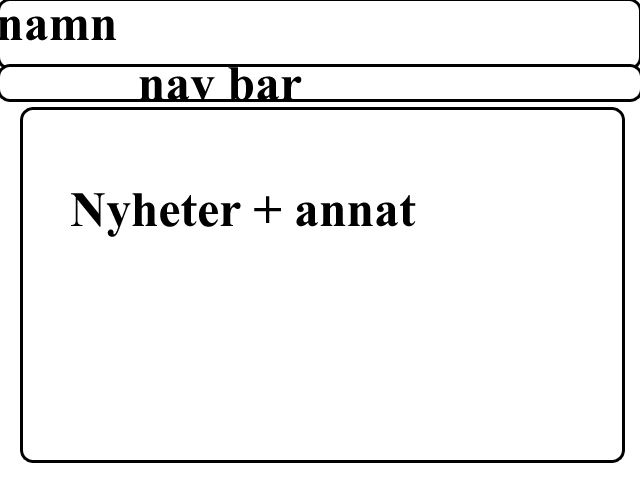
<style>
.page{position:relative;width:640px;height:480px;background:#ffffff}
.page>*{position:absolute;margin:0}
.t1{font:60px "ShonarBangla-Bold";color:#000000}
</style>
<div class="page">
<p class="t1" style="left:139px;top:67px;width:163px;height:34px">nav bar</p>
<p class="t1" style="left:71px;top:193px;width:345px;height:44px">Nyheter + annat</p>
</div>
